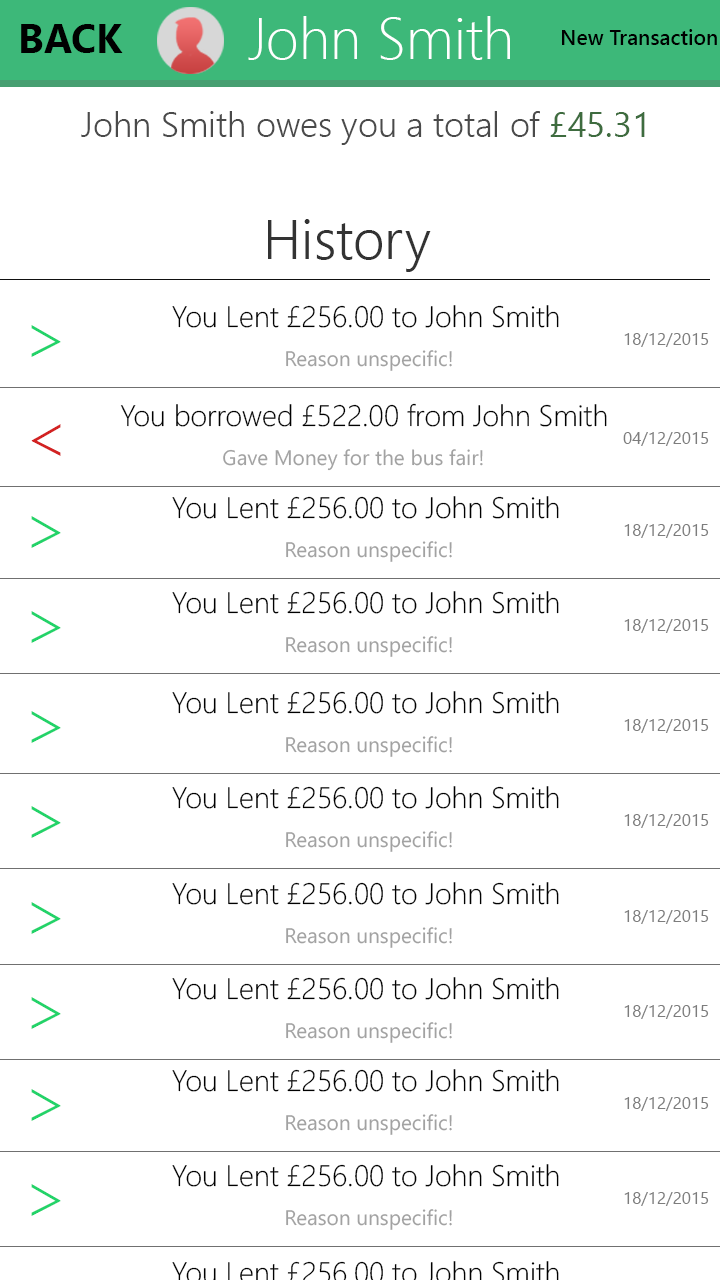
<style>
.page{position:relative;width:720px;height:1280px;background:#ffffff}
.page>*{position:absolute;margin:0}
.t1{font:58.2px "SegoeUI-Light";color:#ffffff}
.t2{font:39.9px "SegoeUI-Bold";color:#000000}
.t3{font:21.1px "SegoeUI-Semibold";color:#000000}
.t4{font:34.8px "SegoeUI-Semilight";color:#4a4a4a}
.t5{font:34.8px "SegoeUI";color:#3e6c3f}
.t6{font:54.9px "SegoeUI-Semilight";color:#333333}
.t7{font:29.6px "SegoeUI-Light";color:#000000}
.t8{font:70.6px "SegoeUI-Light";color:#22d369}
.t9{font:16.9px "SegoeUI";color:#7d7d7d}
.t10{font:21px "SegoeUI";color:#a2a2a2}
.t11{font:70.6px "SegoeUI-Light";color:#d32222}
</style>
<div class="page">
<p class="t1" style="left:248px;top:16px;width:262px;height:44px">John Smith</p>
<p class="t2" style="left:21px;top:24px;width:102px;height:29px">BACK</p>
<p class="t3" style="left:562px;top:29px;width:155px;height:16px">New Transaction</p>
<p class="t4" style="left:81px;top:111px;width:564px;height:34px">John Smith owes you a total of <span class="t5">£45.31</span></p>
<p class="t6" style="left:268px;top:219px;width:163px;height:53px">History</p>
<p class="t7" style="left:172px;top:305px;width:387px;height:23px">You Lent £256.00 to John Smith</p>
<p class="t8" style="left:31px;top:325px;width:30px;height:32px">&gt;</p>
<p class="t9" style="left:624px;top:333px;width:85px;height:14px">18/12/2015</p>
<p class="t10" style="left:286px;top:350px;width:166px;height:21px">Reason unspecific!</p>
<p class="t7" style="left:120px;top:403px;width:487px;height:24px">You borrowed £522.00 from John Smith</p>
<p class="t11" style="left:31px;top:424px;width:30px;height:32px">&lt;</p>
<p class="t9" style="left:623px;top:432px;width:86px;height:14px">04/12/2015</p>
<p class="t10" style="left:223px;top:449px;width:260px;height:22px">Gave Money for the bus fair!</p>
<p class="t7" style="left:172px;top:496px;width:387px;height:23px">You Lent £256.00 to John Smith</p>
<p class="t8" style="left:31px;top:516px;width:30px;height:32px">&gt;</p>
<p class="t9" style="left:624px;top:524px;width:85px;height:14px">18/12/2015</p>
<p class="t10" style="left:286px;top:541px;width:166px;height:21px">Reason unspecific!</p>
<p class="t7" style="left:172px;top:591px;width:387px;height:23px">You Lent £256.00 to John Smith</p>
<p class="t8" style="left:31px;top:611px;width:30px;height:32px">&gt;</p>
<p class="t9" style="left:624px;top:619px;width:85px;height:14px">18/12/2015</p>
<p class="t10" style="left:286px;top:636px;width:166px;height:21px">Reason unspecific!</p>
<p class="t7" style="left:172px;top:691px;width:387px;height:23px">You Lent £256.00 to John Smith</p>
<p class="t8" style="left:31px;top:711px;width:30px;height:32px">&gt;</p>
<p class="t9" style="left:624px;top:719px;width:85px;height:14px">18/12/2015</p>
<p class="t10" style="left:286px;top:736px;width:166px;height:21px">Reason unspecific!</p>
<p class="t7" style="left:172px;top:786px;width:387px;height:23px">You Lent £256.00 to John Smith</p>
<p class="t8" style="left:31px;top:806px;width:30px;height:32px">&gt;</p>
<p class="t9" style="left:624px;top:814px;width:85px;height:14px">18/12/2015</p>
<p class="t10" style="left:286px;top:831px;width:166px;height:21px">Reason unspecific!</p>
<p class="t7" style="left:172px;top:882px;width:387px;height:23px">You Lent £256.00 to John Smith</p>
<p class="t8" style="left:31px;top:902px;width:30px;height:32px">&gt;</p>
<p class="t9" style="left:624px;top:910px;width:85px;height:14px">18/12/2015</p>
<p class="t10" style="left:286px;top:927px;width:166px;height:21px">Reason unspecific!</p>
<p class="t7" style="left:172px;top:977px;width:387px;height:23px">You Lent £256.00 to John Smith</p>
<p class="t8" style="left:31px;top:997px;width:30px;height:32px">&gt;</p>
<p class="t9" style="left:624px;top:1005px;width:85px;height:14px">18/12/2015</p>
<p class="t10" style="left:286px;top:1022px;width:166px;height:21px">Reason unspecific!</p>
<p class="t7" style="left:172px;top:1069px;width:387px;height:23px">You Lent £256.00 to John Smith</p>
<p class="t8" style="left:31px;top:1089px;width:30px;height:32px">&gt;</p>
<p class="t9" style="left:624px;top:1097px;width:85px;height:14px">18/12/2015</p>
<p class="t10" style="left:286px;top:1114px;width:166px;height:21px">Reason unspecific!</p>
<p class="t7" style="left:172px;top:1164px;width:387px;height:23px">You Lent £256.00 to John Smith</p>
<p class="t8" style="left:31px;top:1184px;width:30px;height:32px">&gt;</p>
<p class="t9" style="left:624px;top:1192px;width:85px;height:14px">18/12/2015</p>
<p class="t10" style="left:286px;top:1209px;width:166px;height:21px">Reason unspecific!</p>
</div>
